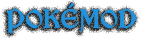
<style>
.page{position:relative;width:141px;height:39px;background:#ffffff}
.page>*{position:absolute;margin:0}
.t1{font:25px "VinqueRg-Regular";letter-spacing:-0.02em;color:#2193dc}
</style>
<div class="page">
<p class="t1" style="left:6px;top:2px;width:131px;height:31px">POKÉMOD</p>
</div>
